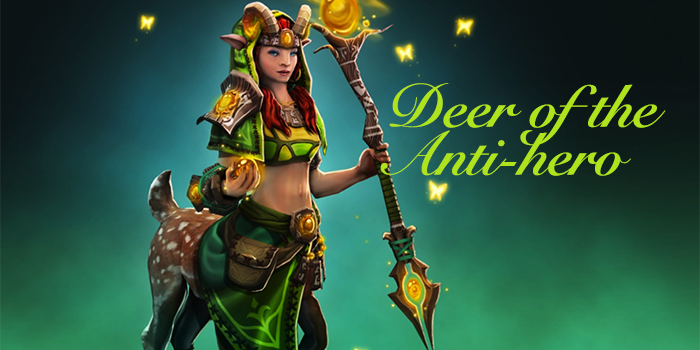
<style>
.page{position:relative;width:700px;height:350px}
.page>*{position:absolute;margin:0}
.t1{font:60px/48px "SnellRoundhand-Bold";letter-spacing:-0.01em;color:#aee31d}
</style>
<div class="page">
<p class="t1" style="left:380px;top:83px;width:286px;height:93px">Deer of the<br>Anti-hero</p>
</div>
